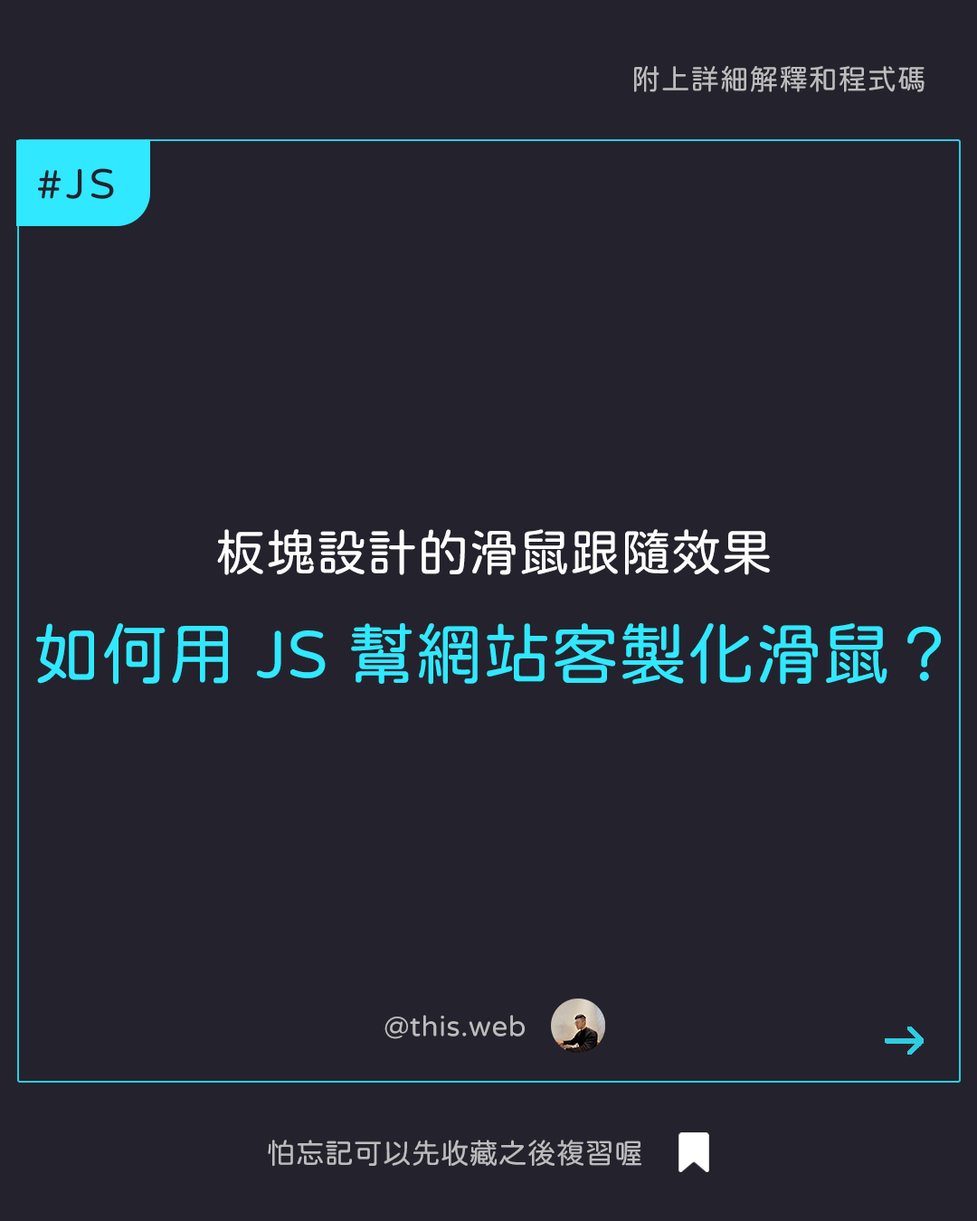
<style>
.page{position:relative;width:977px;height:1221px;background:#24232d}
.page>*{position:absolute;margin:0}
.t1{font:28.9px "jf-openhuninn-1.1";letter-spacing:0.02em;color:#bcbcbd}
.t2{font:43.4px "jf-openhuninn-1.1";letter-spacing:0.08em;color:#24232d}
.t3{font:50.6px "jf-openhuninn-1.1";color:#fefefe}
.t4{font:67.8px "jf-openhuninn-1.1";color:#30e8ff}
.t5{font:28.9px "jf-openhuninn-1.1";color:#bcbcbd}
</style>
<div class="page">
<p class="t1" style="left:634px;top:66px;width:290px;height:26px">附上詳細解釋和程式碼</p>
<p class="t2" style="left:38px;top:168px;width:76px;height:31px">#JS</p>
<p class="t3" style="left:217px;top:529px;width:553px;height:46px">板塊設計的滑鼠跟隨效果</p>
<p class="t4" style="left:36px;top:623px;width:905px;height:62px">如何用 JS 幫網站客製化滑鼠？</p>
<p class="t1" style="left:384px;top:1015px;width:141px;height:24px">@this.web</p>
<p class="t5" style="left:268px;top:1139px;width:373px;height:27px">怕忘記可以先收藏之後複習喔</p>
</div>
